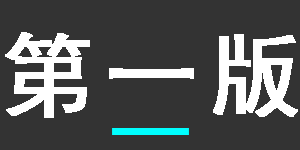
<style>
.page{position:relative;width:300px;height:150px;background:#333333}
.page>*{position:absolute;margin:0}
.t1{font:91.7px "SimHei";letter-spacing:0.1em;color:#ffffff;font-weight:bold}
</style>
<div class="page">
<p class="t1" style="left:5px;top:32px;width:293px;height:86px">第一版</p>
</div>
